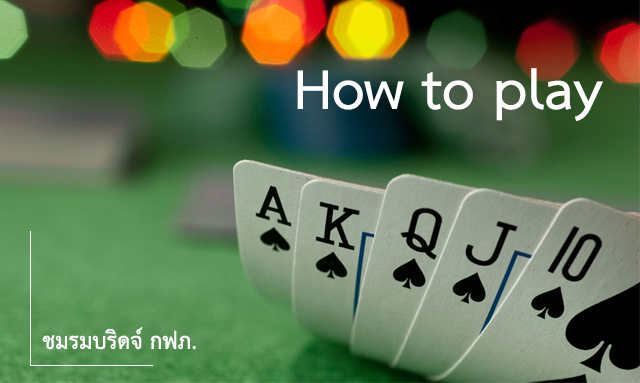
<style>
.page{position:relative;width:640px;height:383px}
.page>*{position:absolute;margin:0}
.t1{font:80px "THSarabunNew-Bold";color:#ffffff}
.t2{font:32px "THSarabunNew-Bold";color:#ffffff}
</style>
<div class="page">
<p class="t1" style="left:297px;top:68px;width:306px;height:53px">How to play</p>
<p class="t2" style="left:42px;top:327px;width:154px;height:23px">ชมรมบริดจ์ กฟภ.</p>
</div>
